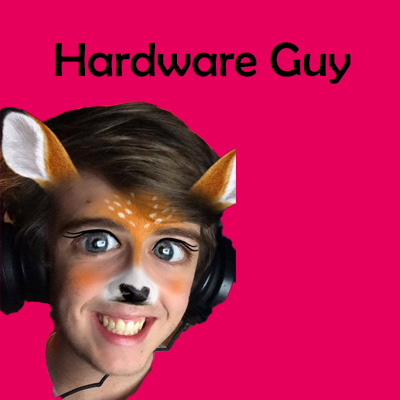
<style>
.page{position:relative;width:400px;height:400px;background:#e6005c}
.page>*{position:absolute;margin:0}
.t1{font:48px "BerlinSansFB-Reg";color:#000000}
</style>
<div class="page">
<p class="t1" style="left:55px;top:42px;width:296px;height:42px">Hardware Guy</p>
</div>
